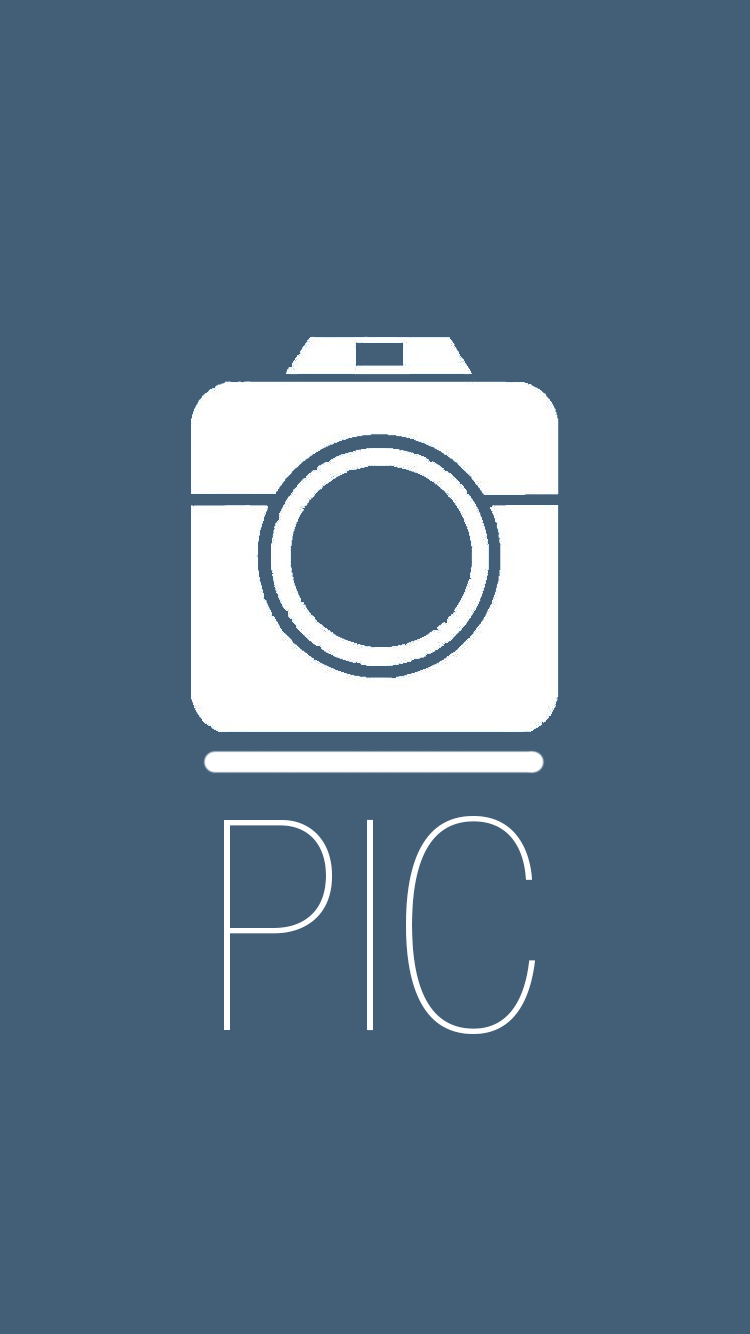
<style>
.page{position:relative;width:750px;height:1334px;background:#435f77}
.page>*{position:absolute;margin:0}
.t1{font:294.7px "HelveticaNeue-UltraLigCond";letter-spacing:0.014em;color:#ffffff}
</style>
<div class="page">
<p class="t1" style="left:224px;top:816px;width:311px;height:218px">PIC</p>
</div>
